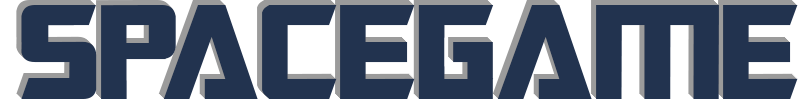
<style>
.page{position:relative;width:809px;height:99px;background:#22334f}
.page>*{position:absolute;margin:0}
.t1{font:150px "TransformersMovie";color:#22334f}
</style>
<div class="page">
<p class="t1" style="left:16px;top:0px;width:777px;height:94px">SpaceGame</p>
<p class="t1" style="left:17px;top:1px;width:777px;height:94px">SpaceGame</p>
<p class="t1" style="left:18px;top:2px;width:777px;height:94px">SpaceGame</p>
<p class="t1" style="left:19px;top:3px;width:777px;height:94px">SpaceGame</p>
<p class="t1" style="left:20px;top:4px;width:777px;height:94px">SpaceGame</p>
<p class="t1" style="left:21px;top:5px;width:777px;height:94px">SpaceGame</p>
</div>
